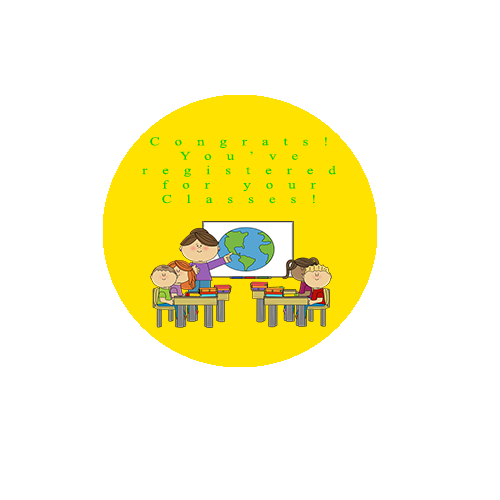
<style>
.page{position:relative;width:500px;height:500px;background:#ffffff}
.page>*{position:absolute;margin:0}
.t1{font:12px "TimesNewRomanPSMT";letter-spacing:0.985em;color:#00cf00;scale:1.26 1}
</style>
<div class="page">
<p class="t1" style="left:142px;top:137px;width:194px;height:67px;text-align:center">Congrats!<br>You’ve <br>registered<br>for your Classes!</p>
</div>
